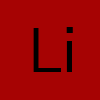
<style>
.page{position:relative;width:100px;height:100px;background:#a60303}
.page>*{position:absolute;margin:0}
.t1{font:62.5px "Muli-Regular";color:#000000}
</style>
<div class="page">
<p class="t1" style="left:33px;top:27px;width:40px;height:45px">Li</p>
</div>
